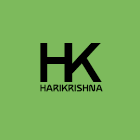
<style>
.page{position:relative;width:140px;height:140px;background:#7dba5c}
.page>*{position:absolute;margin:0}
.t1{font:47.8px "Atures900PERSONALUSEONLY";letter-spacing:-0.17em;color:#000000}
.t2{font:8.1px "Atures900PERSONALUSEONLY";letter-spacing:0.07em;color:#000000}
</style>
<div class="page">
<p class="t1" style="left:40px;top:43px;width:62px;height:39px">HK</p>
<p class="t2" style="left:40px;top:84px;width:63px;height:8px">HARIKRISHNA</p>
</div>
